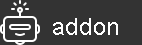
<style>
.page{position:relative;width:142px;height:45px;background:#333333}
.page>*{position:absolute;margin:0}
.t1{font:24px "ArialMT";color:#ffffff}
</style>
<div class="page">
<p class="t1" style="left:53px;top:18px;width:65px;height:17px">addon</p>
</div>
